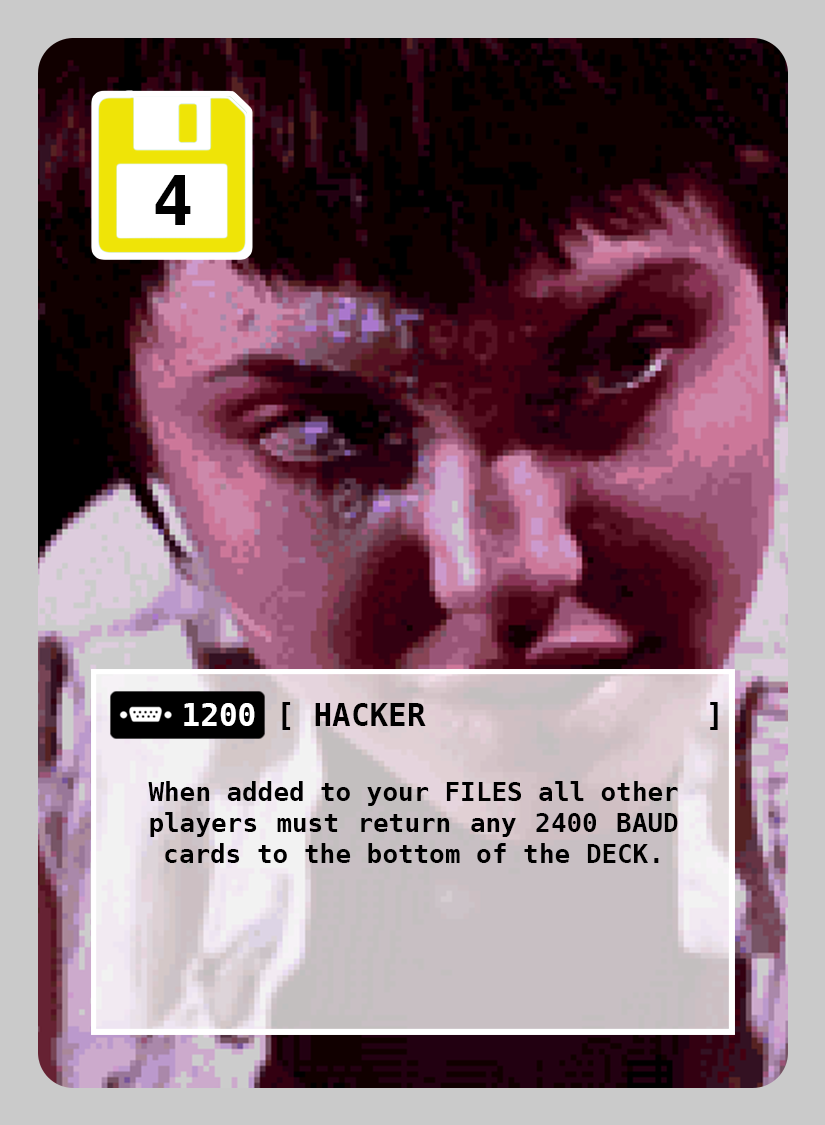
<style>
.page{position:relative;width:825px;height:1125px}
.page>*{position:absolute;margin:0}
.t1{font:69px "DejaVuSansMono-Bold";color:#000000}
.t2{font:31px "DejaVuSansMono-Bold";color:#000000}
.t3{font:31px "DejaVuSansMono-Bold";color:#ffffff}
.t4{font:26px "DejaVuSansMono-Bold";color:#000000}
</style>
<div class="page">
<p class="t1" style="left:155px;top:175px;width:36px;height:50px">4</p>
<p class="t2" style="left:282px;top:702px;width:436px;height:28px">[                      ]</p>
<p class="t3" style="left:184px;top:703px;width:71px;height:23px">1200</p>
<p class="t2" style="left:315px;top:703px;width:111px;height:23px">HACKER</p>
<p class="t4" style="left:148px;top:781px;width:530px;height:82px;text-align:justify">When added to your FILES all other players must return any 2400 BAUD cards to the bottom of the DECK.</p>
</div>
